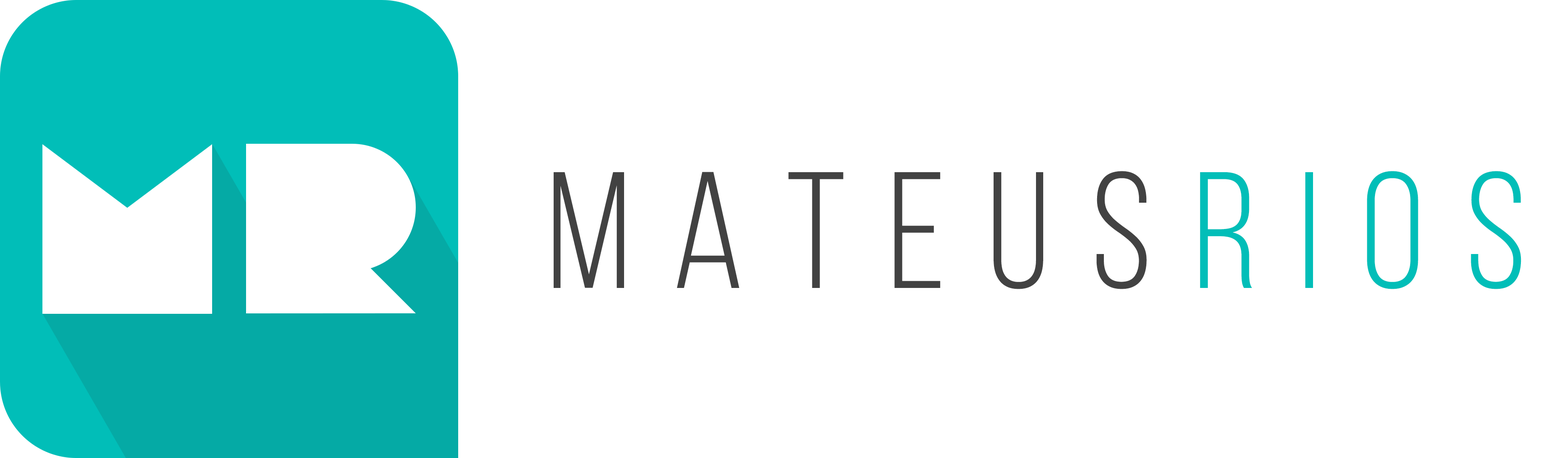
<style>
.page{position:relative;width:1568px;height:458px;background:#ffffff}
.page>*{position:absolute;margin:0}
.t1{font:165.5px "BebasNeueBook";letter-spacing:0.25em;color:#424242}
.t2{font:165.5px "BebasNeueBook";letter-spacing:0.25em;color:#01beb8}
</style>
<div class="page">
<p class="t1" style="left:554px;top:171px;width:967px;height:118px">MATEUS<span class="t2">RIOS</span></p>
</div>
